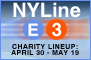
<style>
.page{position:relative;width:91px;height:60px}
.page>*{position:absolute;margin:0}
.t1{font:20px "Helvetica-Bold";color:#ffffff}
.t2{font:7px/6px "Helvetica-Bold";letter-spacing:0.05em;color:#010000}
</style>
<div class="page">
<p class="t1" style="left:13px;top:2px;width:68px;height:16px">NYLine</p>
<p class="t2" style="left:11px;top:44px;width:68px;height:11px;text-align:center">CHARITY LINEUP:<br>APRIL 30 - MAY 19</p>
</div>
